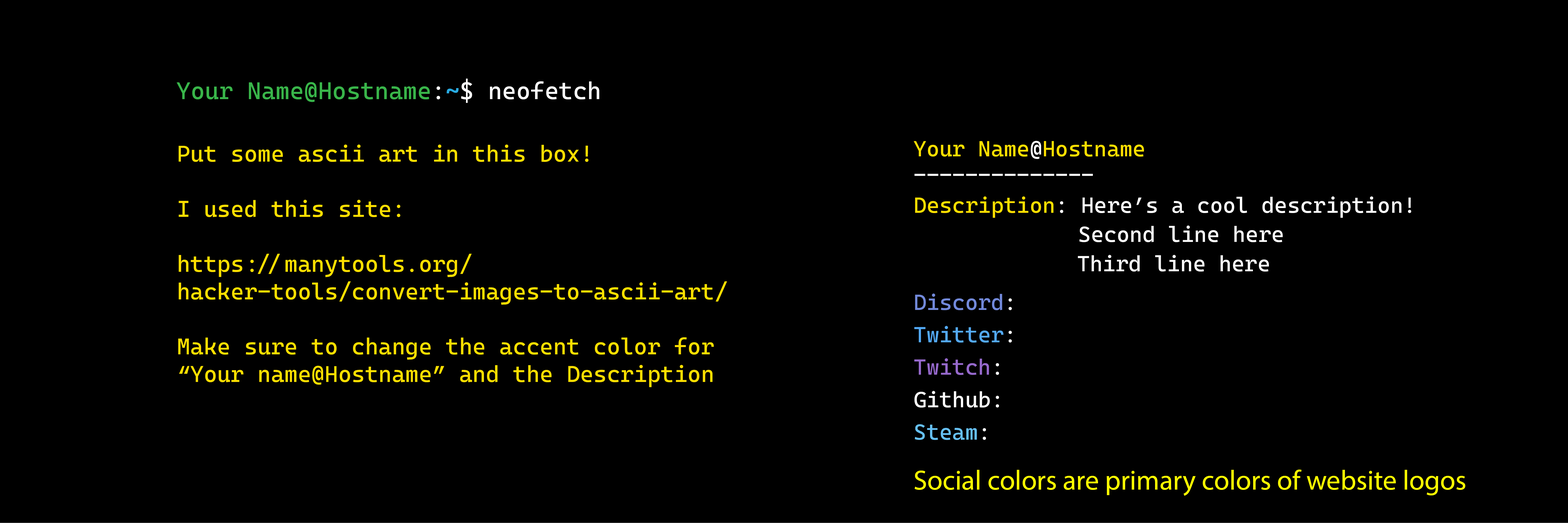
<style>
.page{position:relative;width:1568px;height:523px;background:#000000}
.page>*{position:absolute;margin:0}
.t1{font:24.1px "CascadiaCode-Regular";letter-spacing:0.001em;color:#39b54a}
.t2{font:24.1px "CascadiaCode-Regular";letter-spacing:0.001em;color:#ffffff}
.t3{font:24.1px "CascadiaCode-Regular";letter-spacing:0.001em;color:#29abe2}
.t4{font:22.9px "CascadiaCode-Regular";color:#fedf00}
.t5{font:22px/29.3px "CascadiaCode-Regular";letter-spacing:0.001em;color:#ffffff}
.t6{font:22px "CascadiaCode-Regular";letter-spacing:0.001em;color:#fedf00}
.t7{font:22px "CascadiaCode-Regular";letter-spacing:0.001em;color:#ffffff}
.t8{font:22px/26.1px "CascadiaCode-Regular";letter-spacing:0.001em;color:#ffffff}
.t9{font:22px/30.3px "CascadiaCode-Regular";letter-spacing:0.001em;color:#fedf00}
.t10{font:22px/30.3px "CascadiaCode-Regular";letter-spacing:0.001em;color:#ffffff}
.t11{font:22px/32.4px "CascadiaCode-Regular";letter-spacing:0.001em;color:#7289da}
.t12{font:22px/38.7px "CascadiaCode-Regular";letter-spacing:0.001em;color:#ffffff}
.t13{font:22px/32.4px "CascadiaCode-Regular";letter-spacing:0.001em;color:#53a9f5}
.t14{font:22px/32.4px "CascadiaCode-Regular";letter-spacing:0.001em;color:#ffffff}
.t15{font:22px/32.4px "CascadiaCode-Regular";letter-spacing:0.001em;color:#9669cc}
.t16{font:22px/32.4px "CascadiaCode-Regular";letter-spacing:0.001em;color:#66c0f4}
.t17{font:27.8px "MyriadPro-Regular";color:#ffff00}
</style>
<div class="page">
<p class="t1" style="left:177px;top:79px;width:422px;height:24px">Your Name@Hostname<span class="t2">:</span><span class="t3">~</span><span class="t2">$ neofetch</span></p>
<p class="t4" style="left:178px;top:145px;width:549px;height:242px">Put some ascii art in this box!<br><br>I used this site:<br><br>https://manytools.org/<br>hacker-tools/convert-images-to-ascii-art/<br><br>Make sure to change the accent color for<br>“Your name@Hostname” and the Description</p>
<p class="t5" style="left:914px;top:141px;width:497px;height:299px"><span class="t6">Your Name</span><span class="t7">@</span><span class="t6">Hostname<br></span><span class="t8">--------------<br></span><span class="t9">Description</span><span class="t10">: Here’s a cool description!<br></span>       Second line here <br>     Third line here<br><span class="t11">Discord</span><span class="t12">:<br></span><span class="t13">Twitter</span><span class="t14">: <br></span><span class="t15">Twitch</span><span class="t14">: <br>Github: <br></span><span class="t16">Steam</span><span class="t14">:</span></p>
<p class="t17" style="left:914px;top:469px;width:551px;height:27px">Social colors are primary colors of website logos</p>
</div>
